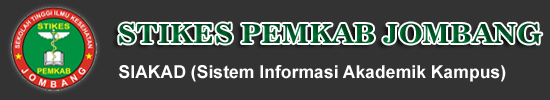
<style>
.page{position:relative;width:550px;height:100px;background:#333333}
.page>*{position:absolute;margin:0}
.t1{font:26.3px "News701BT-BoldA";color:#005325;scale:1.03 1}
.t2{font:17.7px "Arial-BoldMT";color:#ffffff}
</style>
<div class="page">
<p class="t1" style="left:119px;top:23px;width:423px;height:21px">STIKES PEMKAB JOMBANG</p>
<p class="t2" style="left:119px;top:65px;width:387px;height:17px">SIAKAD (Sistem Informasi Akademik Kampus)</p>
</div>
